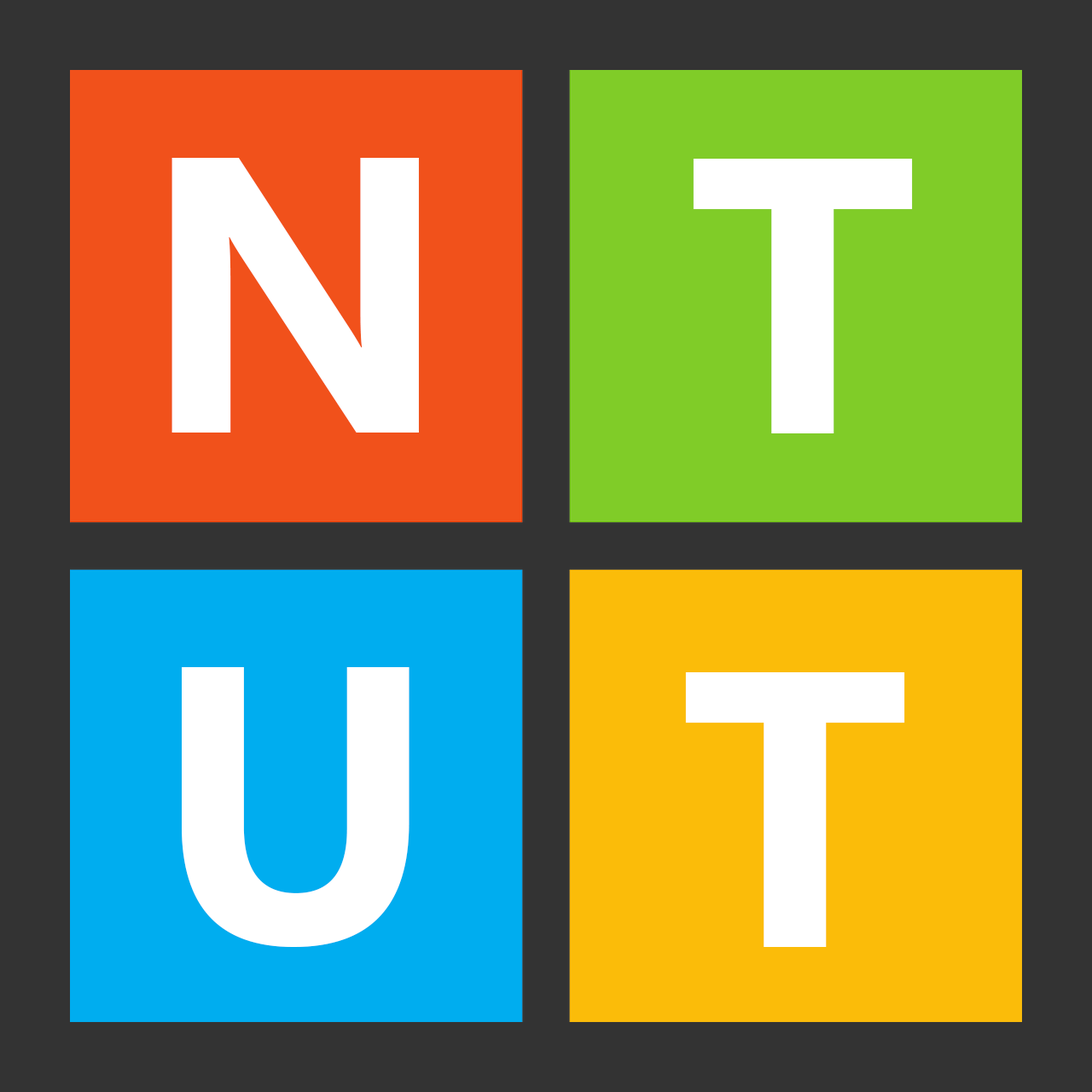
<style>
.page{position:relative;width:1092px;height:1092px;background:#333333}
.page>*{position:absolute;margin:0}
.t1{font:392.4px "SegoeUI-Bold";letter-spacing:0.05em;color:#ffffff}
</style>
<div class="page">
<p class="t1" style="left:171px;top:158px;width:248px;height:275px">N</p>
<p class="t1" style="left:693px;top:159px;width:220px;height:274px">T</p>
<p class="t1" style="left:182px;top:667px;width:227px;height:280px">U</p>
<p class="t1" style="left:685px;top:672px;width:220px;height:275px">T</p>
</div>
